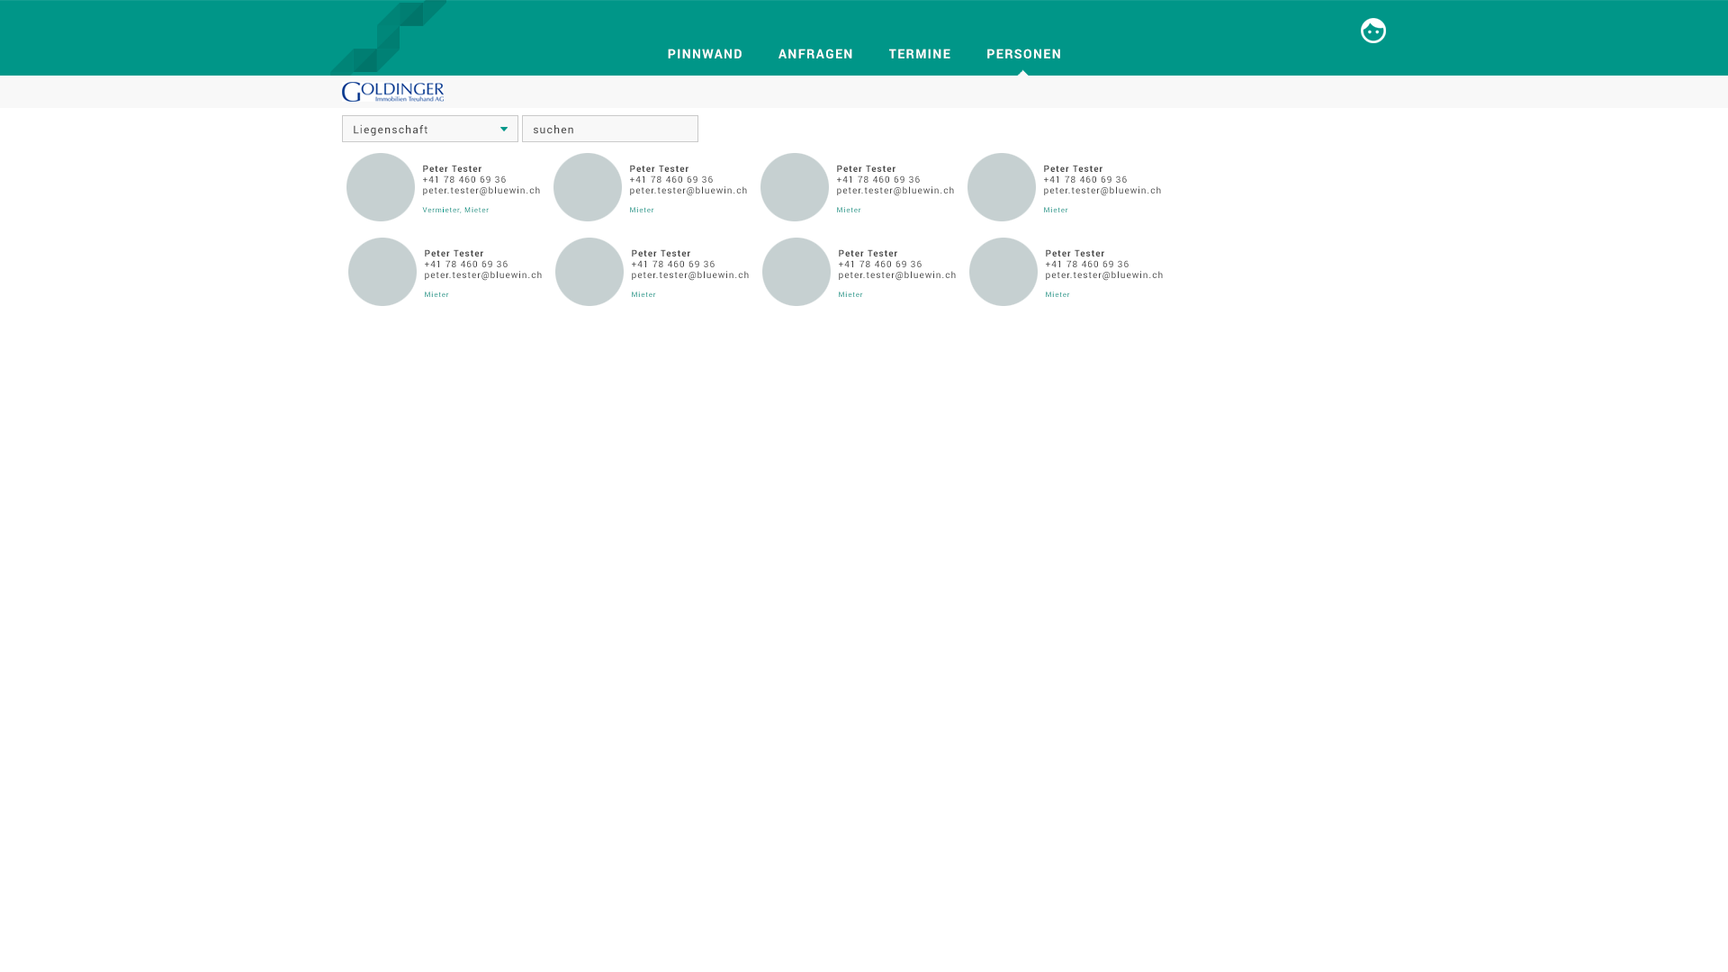
<style>
.page{position:relative;width:1728px;height:972px;background:#ffffff}
.page>*{position:absolute;margin:0}
.t1{font:12.6px "Roboto-Bold";letter-spacing:0.1em;color:#ffffff}
.t2{font:10.8px "Roboto-Regular";letter-spacing:0.1em;color:#454545}
.t3{font:9px/10.8px "Roboto-Regular";letter-spacing:0.1em;color:#454545}
.t4{font:9px/10.8px "Roboto-Bold";letter-spacing:0.1em;color:#454545}
.t5{font:7.2px/8.1px "Roboto-Regular";letter-spacing:0.1em;color:#009688}
.t6{font:7.2px/10.8px "Roboto-Regular";letter-spacing:0.1em;color:#009688}
</style>
<div class="page">
<p class="t1" style="left:668px;top:49px;width:392px;height:9px">PINNWAND        ANFRAGEN        TERMINE        PERSONEN</p>
<p class="t2" style="left:354px;top:124px;width:74px;height:12px">Liegenschaft</p>
<p class="t2" style="left:534px;top:125px;width:39px;height:9px">suchen</p>
<p class="t3" style="left:422px;top:165px;width:118px;height:48px"><span class="t4">Peter Tester</span><br>+41 78 460 69 36<br>peter.tester@bluewin.ch<br><br><span class="t5">Vermieter, Mie</span><span class="t6">ter</span></p>
<p class="t3" style="left:630px;top:165px;width:117px;height:47px"><span class="t4">Peter Tester</span><br>+41 78 460 69 36<br>peter.tester@bluewin.ch<br><br><span class="t5">Mie</span><span class="t6">ter</span></p>
<p class="t3" style="left:837px;top:165px;width:117px;height:47px"><span class="t4">Peter Tester</span><br>+41 78 460 69 36<br>peter.tester@bluewin.ch<br><br><span class="t5">Mie</span><span class="t6">ter</span></p>
<p class="t3" style="left:1044px;top:165px;width:117px;height:47px"><span class="t4">Peter Tester</span><br>+41 78 460 69 36<br>peter.tester@bluewin.ch<br><br><span class="t5">Mie</span><span class="t6">ter</span></p>
<p class="t3" style="left:425px;top:249px;width:117px;height:48px"><span class="t4">Peter Tester</span><br>+41 78 460 69 36<br>peter.tester@bluewin.ch<br><br><span class="t5">Mie</span><span class="t6">ter</span></p>
<p class="t3" style="left:632px;top:249px;width:117px;height:48px"><span class="t4">Peter Tester</span><br>+41 78 460 69 36<br>peter.tester@bluewin.ch<br><br><span class="t5">Mie</span><span class="t6">ter</span></p>
<p class="t3" style="left:839px;top:249px;width:117px;height:48px"><span class="t4">Peter Tester</span><br>+41 78 460 69 36<br>peter.tester@bluewin.ch<br><br><span class="t5">Mie</span><span class="t6">ter</span></p>
<p class="t3" style="left:1046px;top:249px;width:117px;height:48px"><span class="t4">Peter Tester</span><br>+41 78 460 69 36<br>peter.tester@bluewin.ch<br><br><span class="t5">Mie</span><span class="t6">ter</span></p>
</div>
